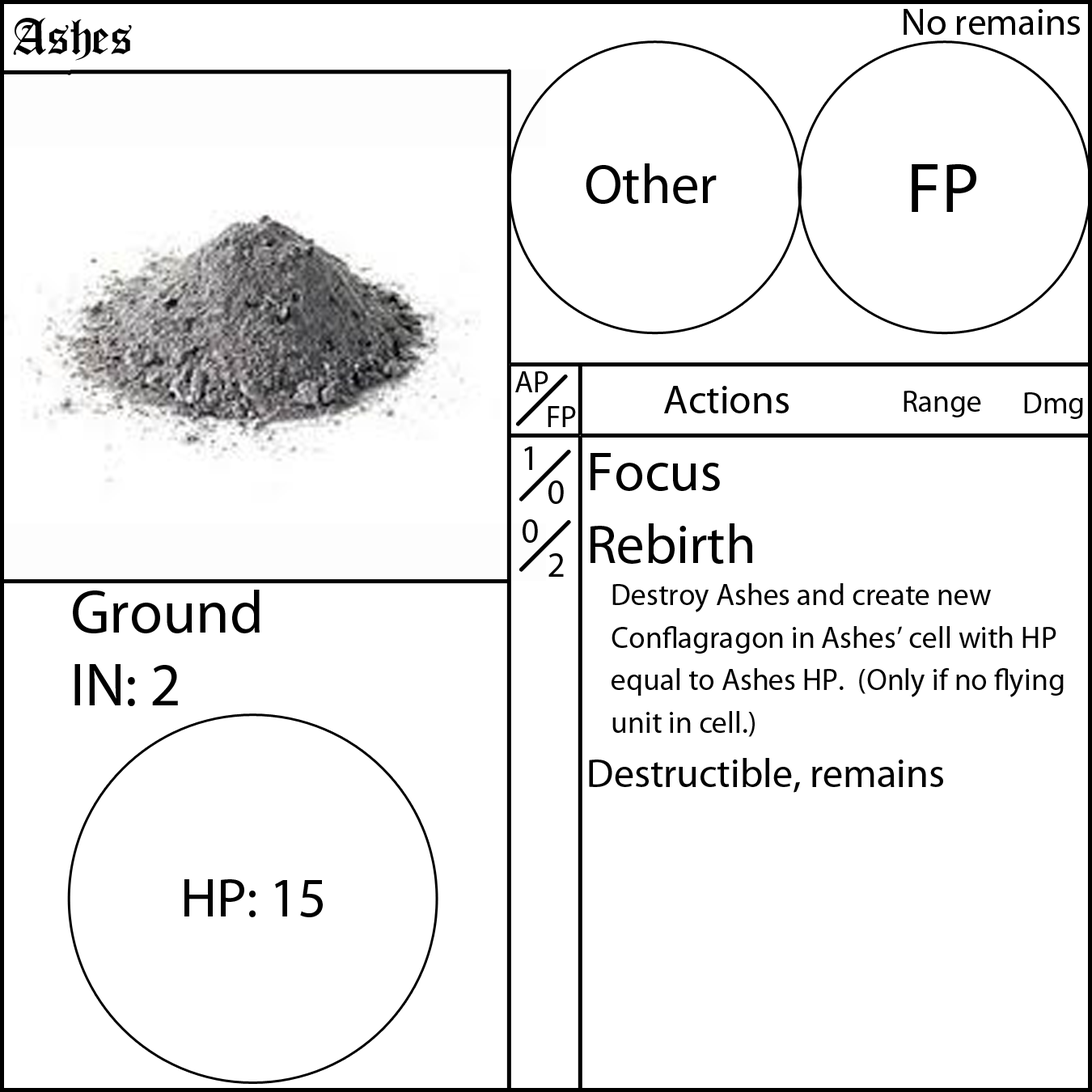
<style>
.page{position:relative;width:1092px;height:1092px;background:#ffffff}
.page>*{position:absolute;margin:0}
.t1{font:55.6px "OldLondon";color:#000000}
.t2{font:37.9px "MyriadPro-Regular";color:#000000}
.t3{font:55.6px "MyriadPro-Regular";color:#000000}
.t4{font:70.8px "MyriadPro-Regular";color:#000000}
.t5{font:30.3px "MyriadPro-Regular";color:#000000}
.t6{font:40.4px "MyriadPro-Regular";color:#000000}
.t7{font:35.4px "MyriadPro-Regular";color:#000000}
.t8{font:60.7px "MyriadPro-Regular";color:#000000}
</style>
<div class="page">
<p class="t1" style="left:13px;top:18px;width:119px;height:43px">Ashes</p>
<p class="t2" style="left:904px;top:9px;width:176px;height:26px">No remains</p>
<p class="t3" style="left:586px;top:163px;width:131px;height:41px">Other</p>
<p class="t4" style="left:912px;top:164px;width:64px;height:48px">FP</p>
<p class="t5" style="left:515px;top:371px;width:33px;height:21px">AP</p>
<p class="t6" style="left:664px;top:386px;width:125px;height:27px">Actions</p>
<p class="t5" style="left:904px;top:391px;width:77px;height:26px">Range</p>
<p class="t5" style="left:1024px;top:392px;width:59px;height:27px">Dmg</p>
<p class="t5" style="left:548px;top:406px;width:28px;height:21px">FP</p>
<p class="t7" style="left:523px;top:447px;width:15px;height:96px">1<br>0</p>
<p class="t5" style="left:589px;top:453px;width:475px;height:340px"><span class="t3">Focus<br>Rebirth<br></span> Destroy Ashes and create new <br> Conflagragon in Ashes’ cell with HP  <br> equal to Ashes HP.  (Only if no flying <br> unit in cell.)<br><span class="t6">Destructible, remains</span></p>
<p class="t7" style="left:548px;top:480px;width:16px;height:97px">0<br>2</p>
<p class="t8" style="left:73px;top:590px;width:187px;height:116px">Ground<br>IN: 2</p>
<p class="t3" style="left:184px;top:879px;width:139px;height:38px">HP: 15</p>
</div>
